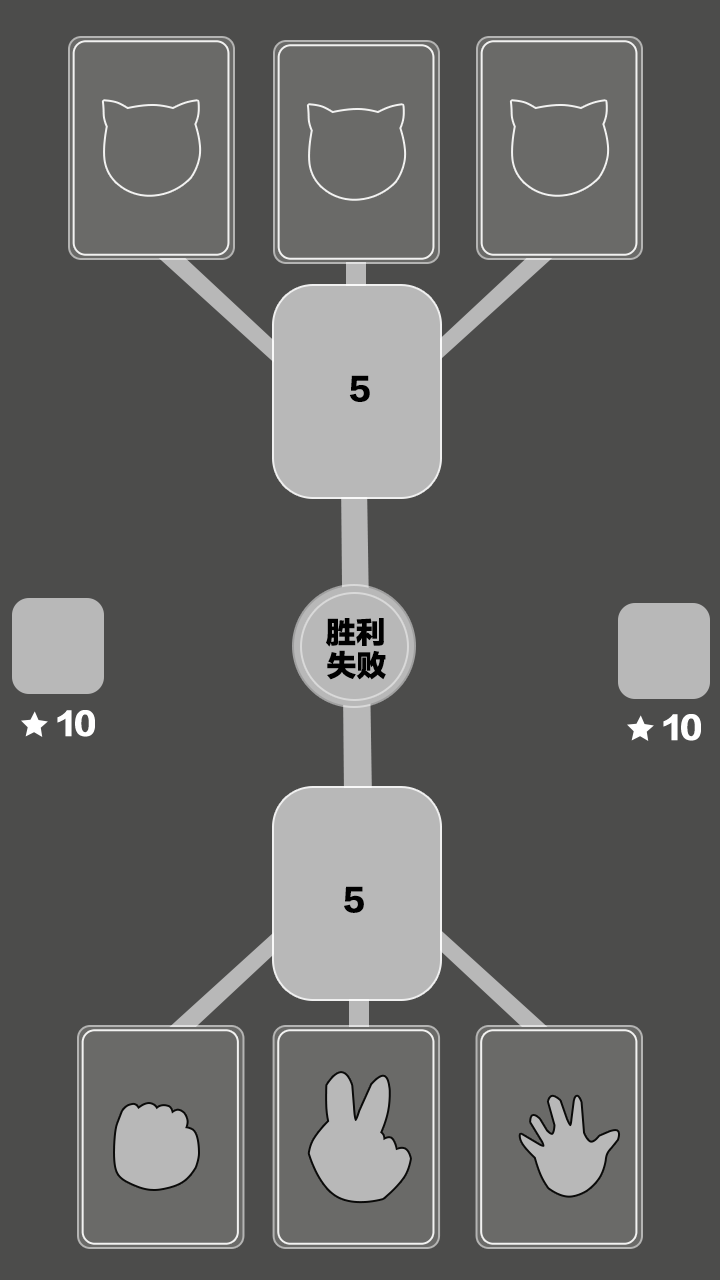
<style>
.page{position:relative;width:720px;height:1280px;background:#4c4c4b}
.page>*{position:absolute;margin:0}
.t1{font:30px "FZLTTHK--GBK1-0";color:#000000}
.t2{font:29.6px "FZLTTHK--GBK1-0";color:#ffffff}
</style>
<div class="page">
<p class="t1" style="left:349px;top:375px;width:21px;height:27px">5</p>
<p class="t1" style="left:326px;top:618px;width:58px;height:29px">胜利</p>
<p class="t1" style="left:327px;top:650px;width:59px;height:30px">失败</p>
<p class="t2" style="left:57px;top:710px;width:38px;height:27px">10</p>
<p class="t2" style="left:663px;top:714px;width:38px;height:27px">10</p>
<p class="t1" style="left:344px;top:886px;width:20px;height:27px">5</p>
</div>
